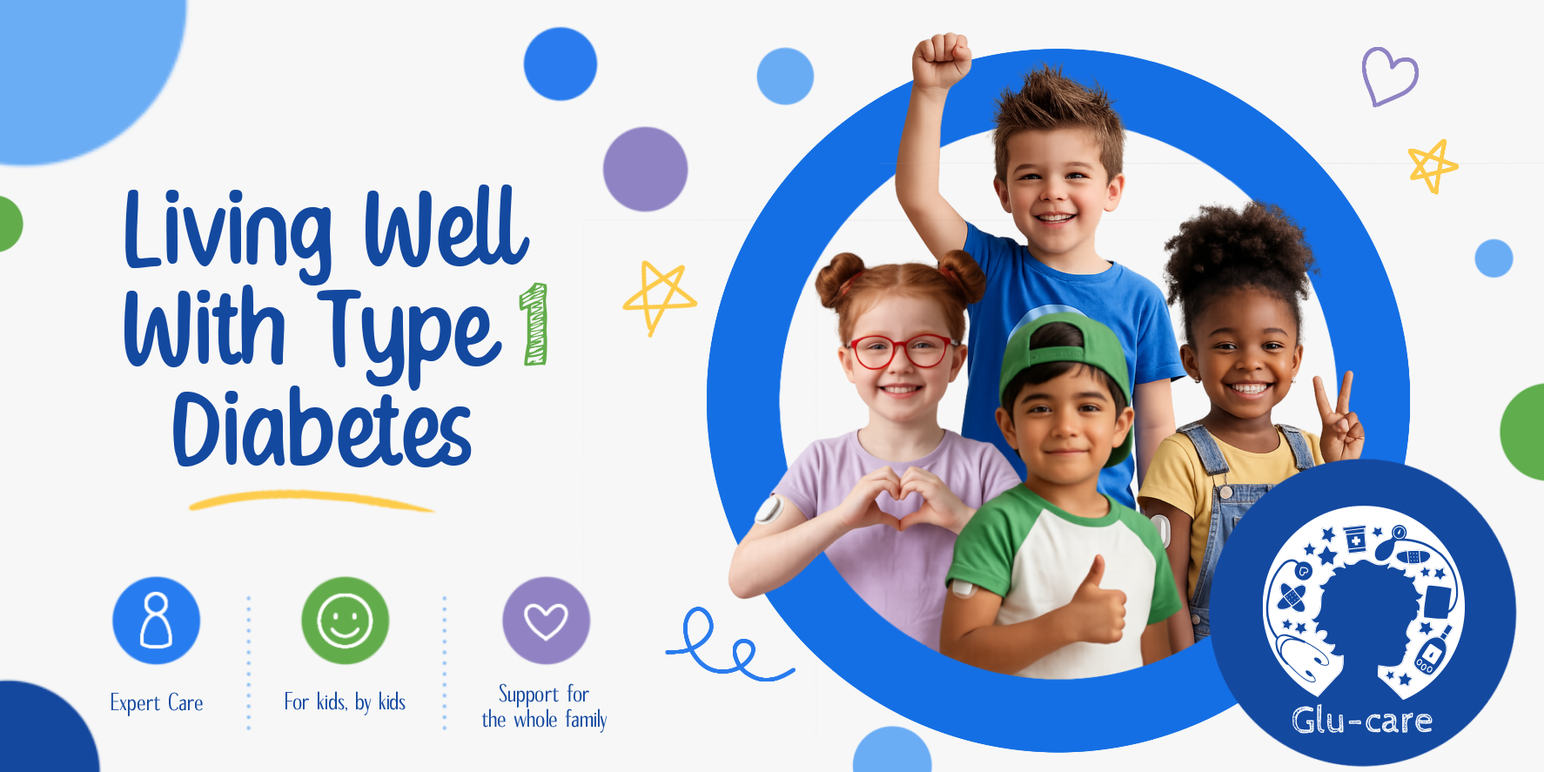
<style>
.page{position:relative;width:1544px;height:772px;background:#f7f7f7}
.page>*{position:absolute;margin:0}
.t1{font:112.9px/100.4px "ShiftyNotes-Regular";color:#1449a0;scale:1.06 1}
.t2{font:114.3px "CabinSketch-Bold";color:#63ac4b}
.t3{font:28px/25.4px "BenedictSansRegular";color:#1449a0}
.t4{font:28px "BenedictSansRegular";color:#1449a0}
.t5{font:38.1px "CabinSketch-Regular";color:#ffffff}
</style>
<div class="page">
<p class="t1" style="left:124px;top:185px;width:406px;height:282px;text-align:center">Living Well <br>  With Type  <br>Diabetes</p>
<p class="t2" style="left:519px;top:282px;width:29px;height:84px">1</p>
<p class="t3" style="left:481px;top:683px;width:127px;height:50px;text-align:center">Support for<br>the whole family</p>
<p class="t4" style="left:111px;top:692px;width:92px;height:24px">Expert Care</p>
<p class="t4" style="left:286px;top:691px;width:120px;height:25px">For kids, by kids</p>
<p class="t5" style="left:1293px;top:704px;width:140px;height:30px">Glu-care</p>
</div>
